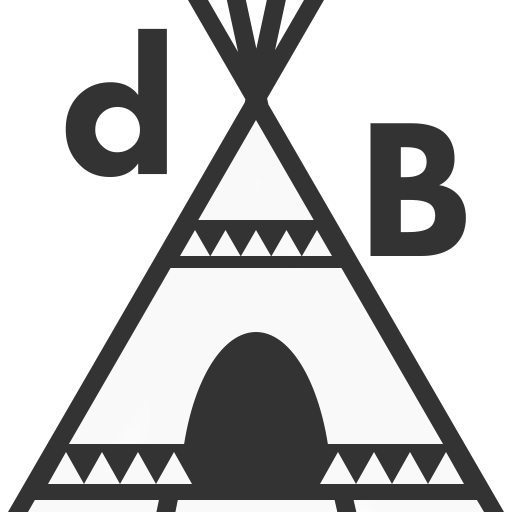
<style>
.page{position:relative;width:512px;height:512px;background:#ffffff}
.page>*{position:absolute;margin:0}
.t1{font:198.7px "FuturaPT-Heavy";color:#333333}
</style>
<div class="page">
<p class="t1" style="left:65px;top:28px;width:102px;height:149px">d</p>
<p class="t1" style="left:370px;top:123px;width:96px;height:133px">B</p>
</div>
